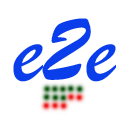
<style>
.page{position:relative;width:128px;height:128px;background:#ffffff}
.page>*{position:absolute;margin:0}
.t1{font:100px "BrushScriptMT";color:#0a3eea}
</style>
<div class="page">
<p class="t1" style="left:13px;top:18px;width:103px;height:64px">e2e</p>
</div>
